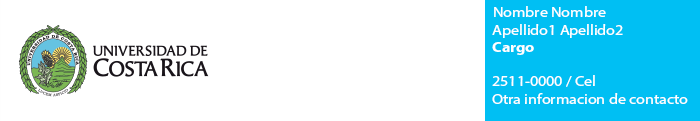
<style>
.page{position:relative;width:700px;height:121px;background:#ffffff}
.page>*{position:absolute;margin:0}
.t1{font:14.4px "MyriadPro-Regular";color:#ffffff;scale:1.11 1}
.t2{font:14.4px "MyriadPro-Regular";letter-spacing:-0.003em;color:#ffffff;scale:1.11 1}
.t3{font:14.4px "MyriadPro-Bold";letter-spacing:-0.009em;color:#ffffff;scale:1.11 1}
</style>
<div class="page">
<p class="t1" style="left:492px;top:6px;width:196px;height:98px">Nombre Nombre<br><span class="t2">Apellido1 Apellido2<br></span><span class="t3">Cargo<br><br></span>2511-0000 / Cel<br>Otra informacion de contacto</p>
</div>
